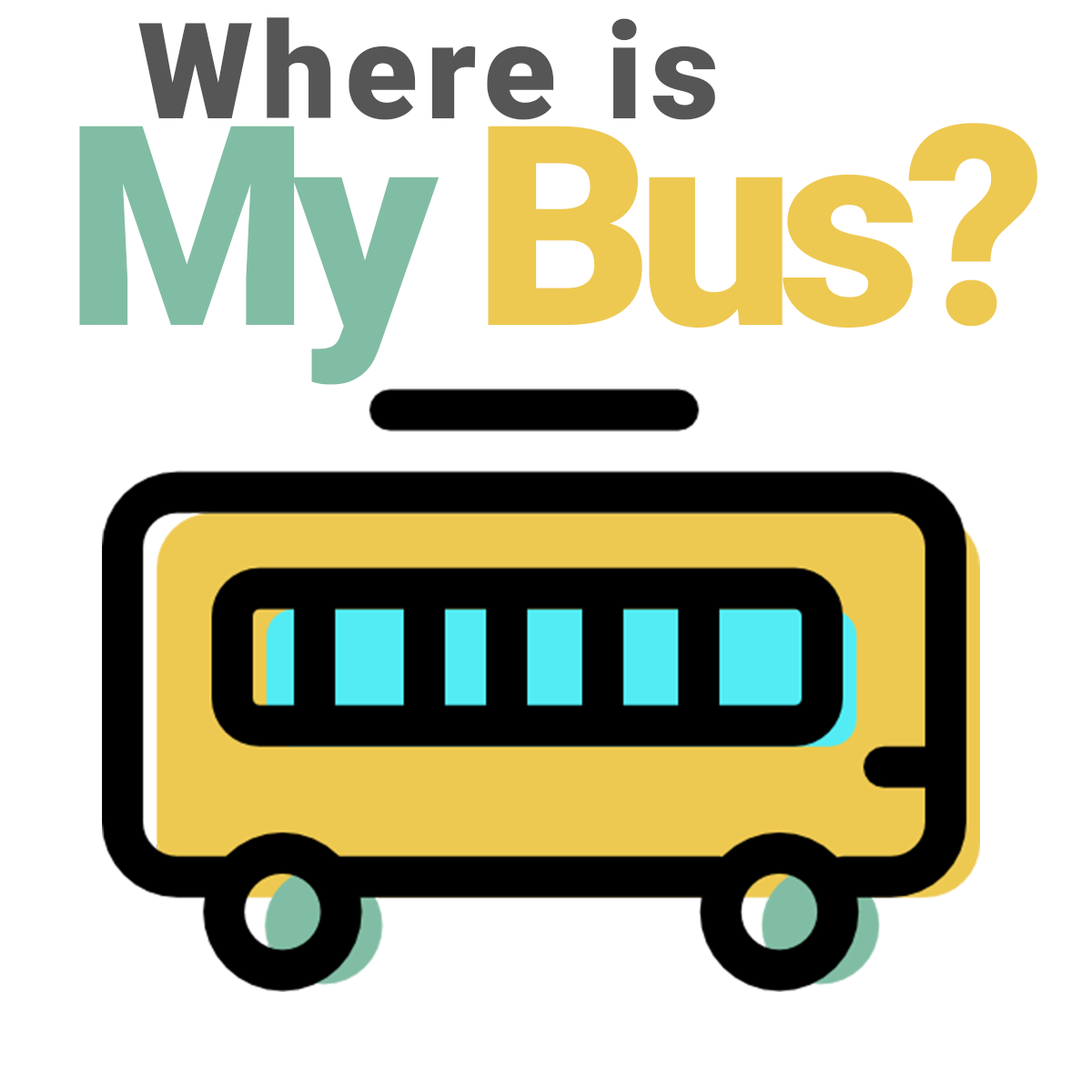
<style>
.page{position:relative;width:1092px;height:1092px;background:#ffffff}
.page>*{position:absolute;margin:0}
.t1{font:133.9px "Roboto-Black";letter-spacing:0.06em;color:#565656}
.t2{font:279.3px "Roboto-Black";letter-spacing:-0.06em;color:#edc951}
.t3{font:133.9px "Roboto-Black";letter-spacing:-0.06em;color:#565656}
.t4{font:279.3px "Roboto-Black";letter-spacing:-0.06em;color:#81bda4}
</style>
<div class="page">
<p class="t1" style="left:138px;top:17px;width:577px;height:103px">Where is</p>
<p class="t2" style="left:79px;top:123px;width:958px;height:262px"><span class="t3"> <br></span><span class="t4">My </span>Bus?</p>
</div>
